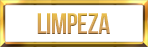
<style>
.page{position:relative;width:148px;height:47px;background:#ffffff}
.page>*{position:absolute;margin:0}
.t1{font:30px "BebasNeue";letter-spacing:-0.02em}
</style>
<div class="page">
<p class="t1" style="left:37px;top:13px;width:73px;height:21px">limpeza</p>
</div>
